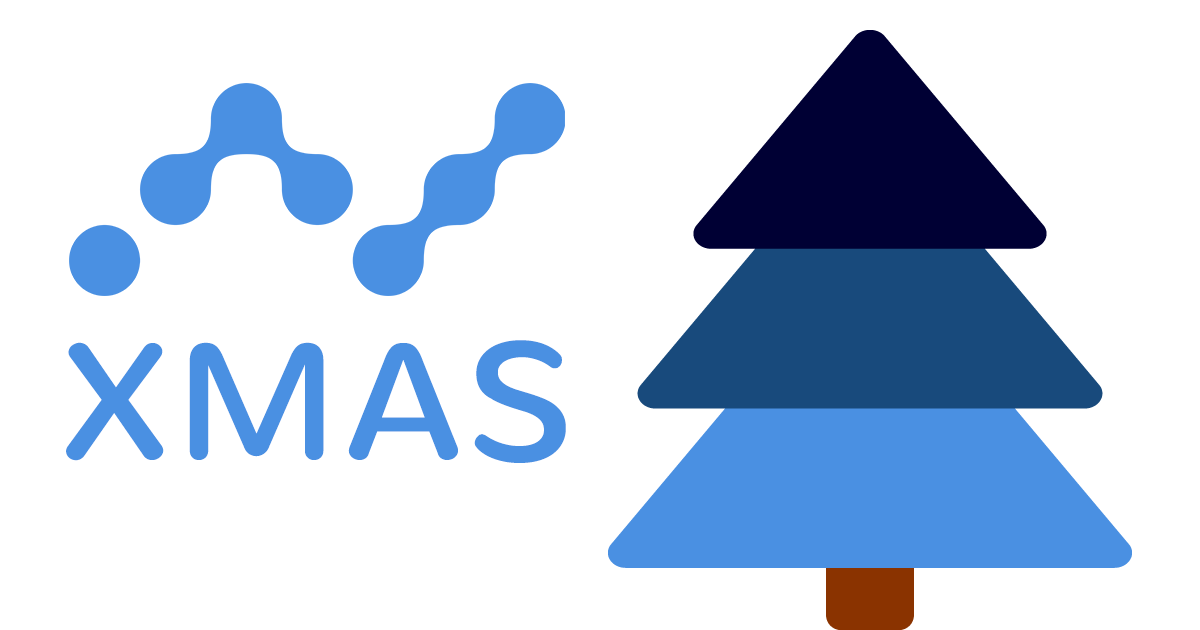
<style>
.page{position:relative;width:1200px;height:630px;background:#ffffff}
.page>*{position:absolute;margin:0}
.t1{font:166.7px "Nunito-Regular";letter-spacing:0.04em;color:#4a90e2}
</style>
<div class="page">
<p class="t1" style="left:66px;top:340px;width:500px;height:123px">XMAS</p>
</div>
